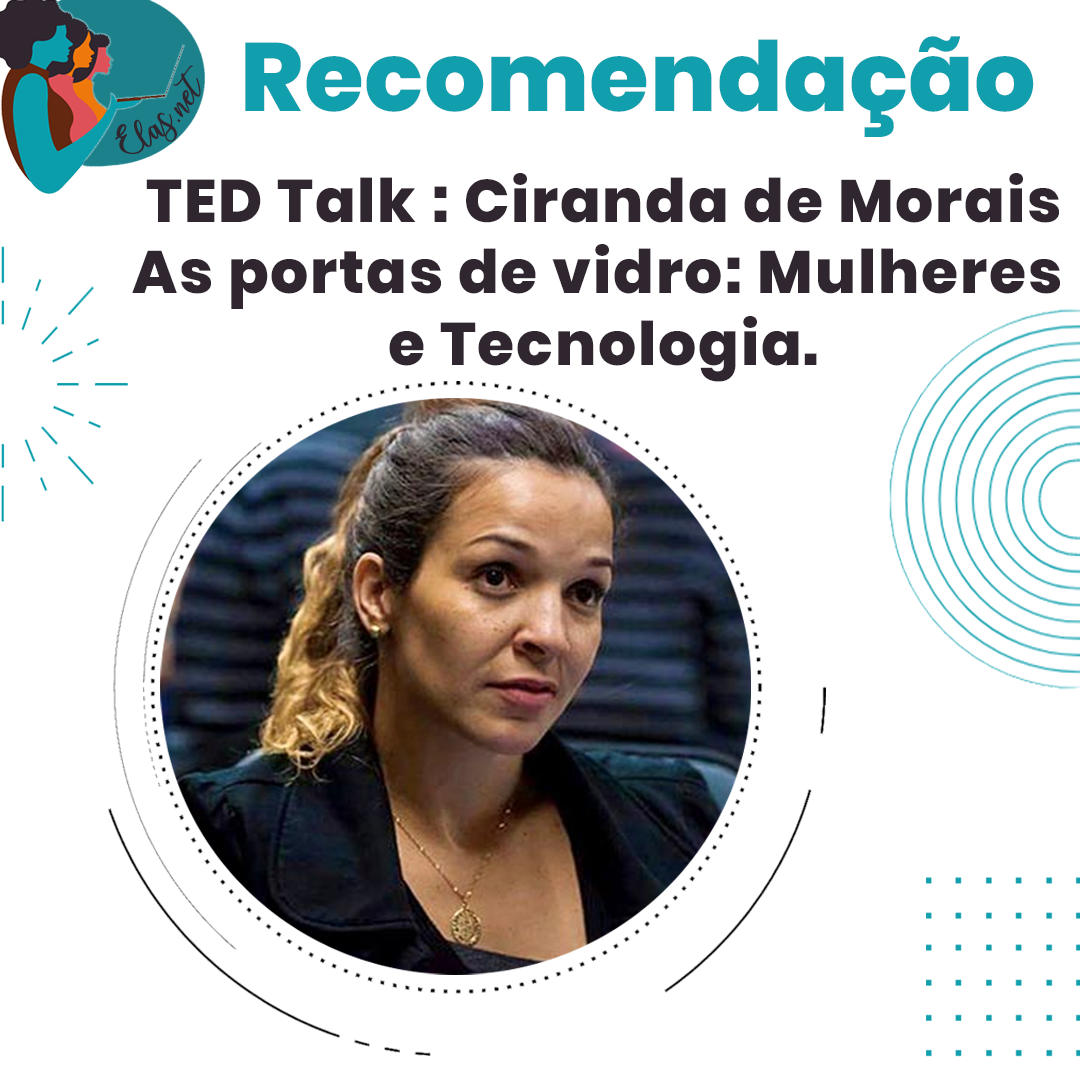
<style>
.page{position:relative;width:1080px;height:1080px;background:#ffffff}
.page>*{position:absolute;margin:0}
.t1{font:96.7px "Poppins-ExtraBold";letter-spacing:0.005em;color:#0a9eac}
.t2{font:25px "charlinda-Regular";color:#2f262f;scale:1.18 1}
.t3{font:60px/71.3px "Poppins-ExtraBold";letter-spacing:0.03em;color:#2f262f}
</style>
<div class="page">
<p class="t1" style="left:245px;top:36px;width:789px;height:101px">Recomendação</p>
<p class="t2" style="left:115px;top:65px;width:86px;height:89px;rotate:-43deg">Elas.net</p>
<p class="t3" style="left:132px;top:173px;width:928px;height:209px;text-align:center">TED Talk : Ciranda de Morais<br>As portas de vidro: Mulheres <br>e Tecnologia.</p>
</div>
